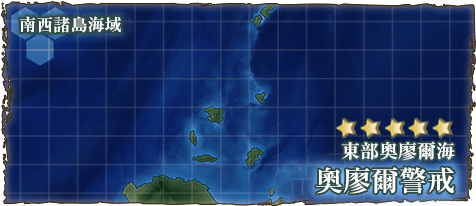
<style>
.page{position:relative;width:476px;height:206px}
.page>*{position:absolute;margin:0}
.t1{font:17px "RyuminPr6N-ExBold";color:#ffffff}
.t2{font:19px "RyuminPro-ExBold";color:#ffffff}
.t3{font:28px "RyuminPro-ExBold";color:#ffffff}
</style>
<div class="page">
<p class="t1" style="left:19px;top:16px;width:102px;height:17px">南西諸島海域</p>
<p class="t2" style="left:342px;top:141px;width:113px;height:19px">東部奧廖爾海</p>
<p class="t3" style="left:316px;top:167px;width:138px;height:27px">奧廖爾警戒</p>
</div>
